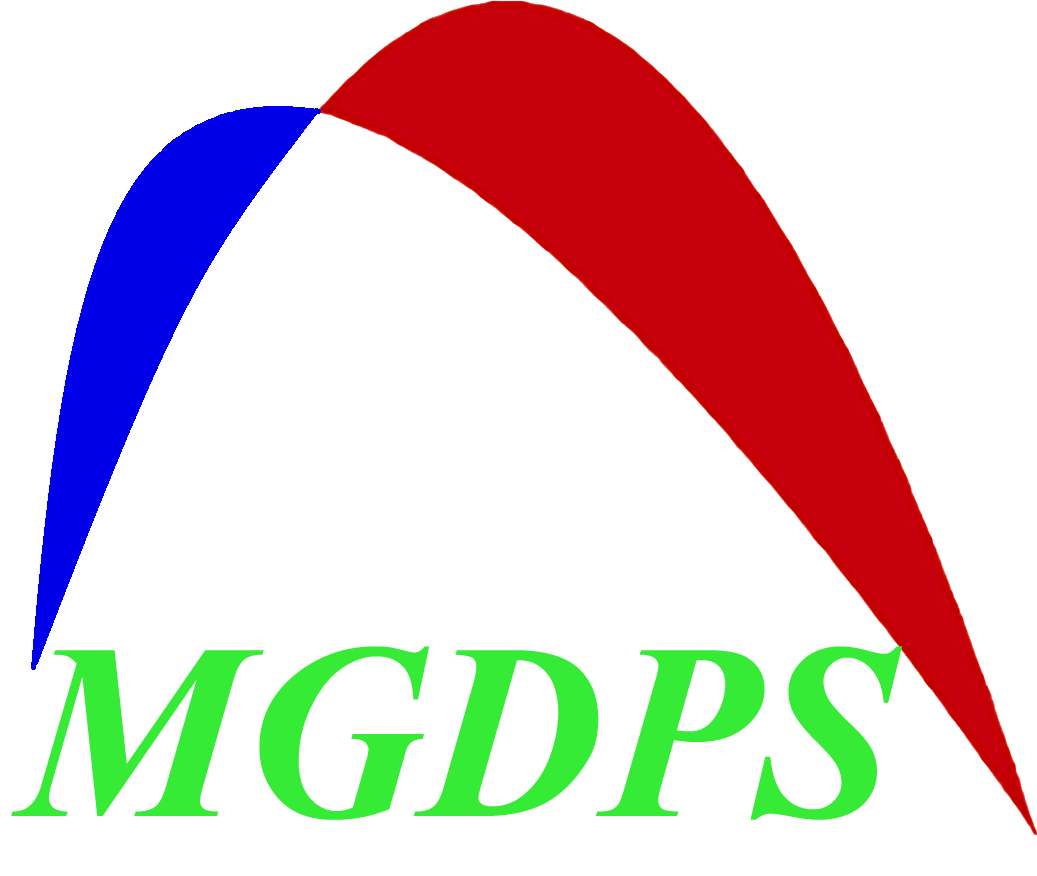
<style>
.page{position:relative;width:1037px;height:876px;background:#ffffff}
.page>*{position:absolute;margin:0}
.t1{font:250px "TimesNewRomanPS-BoldItalicMT";color:#35eb35}
</style>
<div class="page">
<p class="t1" style="left:11px;top:646px;width:891px;height:174px">MGDPS</p>
</div>
